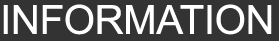
<style>
.page{position:relative;width:279px;height:41px;background:#333333}
.page>*{position:absolute;margin:0}
.t1{font:40px "ArialMT";letter-spacing:-0.01em;color:#ffffff}
</style>
<div class="page">
<p class="t1" style="left:3px;top:4px;width:269px;height:31px">INFORMATION</p>
</div>
